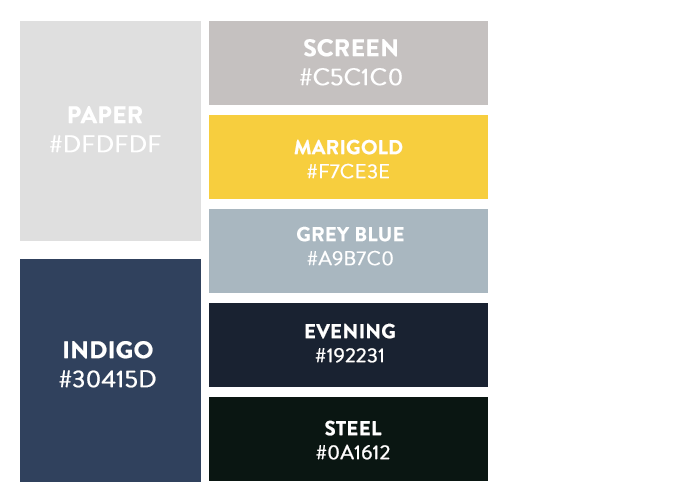
<style>
.page{position:relative;width:700px;height:500px;background:#ffffff}
.page>*{position:absolute;margin:0}
.t1{font:24px "BrandonGrotesque-Regular";color:#ffffff;text-transform:uppercase;font-weight:bold}
.t2{font:24px "BrandonGrotesque-Bold";color:#ffffff;text-transform:uppercase;font-weight:bold}
.t3{font:20px "BrandonGrotesque-Bold";color:#ffffff;text-transform:uppercase;font-weight:bold}
.t4{font:20px "BrandonGrotesque-Regular";color:#ffffff;text-transform:uppercase;font-weight:bold}
</style>
<div class="page">
<p class="t1" style="left:300px;top:39px;width:102px;height:47px;text-align:center"><span class="t2">Screen<br></span>#c5c1c0</p>
<p class="t1" style="left:50px;top:106px;width:111px;height:47px;text-align:center"><span class="t2">Paper<br></span>#dfdfdf</p>
<p class="t3" style="left:294px;top:139px;width:109px;height:40px;text-align:center">Marigold<br><span class="t4">#f7ce3e</span></p>
<p class="t3" style="left:297px;top:226px;width:107px;height:40px;text-align:center">Grey Blue<br><span class="t4">#a9b7c0</span></p>
<p class="t3" style="left:305px;top:323px;width:90px;height:40px;text-align:center">Evening<br><span class="t4">#192231</span></p>
<p class="t1" style="left:59px;top:341px;width:97px;height:47px;text-align:center"><span class="t2">Indigo<br></span>#30415D</p>
<p class="t4" style="left:316px;top:420px;width:74px;height:40px;text-align:center"><span class="t3">Steel<br></span>#0A1612</p>
</div>
